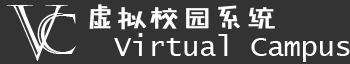
<style>
.page{position:relative;width:350px;height:64px;background:#333333}
.page>*{position:absolute;margin:0}
.t1{font:75.6px "Castellar";letter-spacing:0.075em;color:#ffffff}
.t2{font:29.3px "FZJHJW-GB1-0";letter-spacing:0.075em;color:#ffffff;font-weight:bold}
.t3{font:56px "Castellar";letter-spacing:0.075em;color:#ffffff}
.t4{font:29.3px "LucidaConsole";letter-spacing:-0.025em;color:#ffffff}
</style>
<div class="page">
<p class="t1" style="left:6px;top:5px;width:62px;height:56px">V</p>
<p class="t2" style="left:89px;top:4px;width:186px;height:26px">虚拟校园系统</p>
<p class="t3" style="left:37px;top:13px;width:39px;height:41px">C</p>
<p class="t4" style="left:114px;top:33px;width:236px;height:29px">Virtual Campus</p>
</div>
